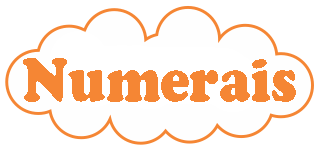
<style>
.page{position:relative;width:319px;height:149px;background:#ffffff}
.page>*{position:absolute;margin:0}
.t1{font:60px "CooperBlackStd";color:#f58634;scale:0.88 1}
</style>
<div class="page">
<p class="t1" style="left:23px;top:58px;width:273px;height:44px">Numerais</p>
</div>
